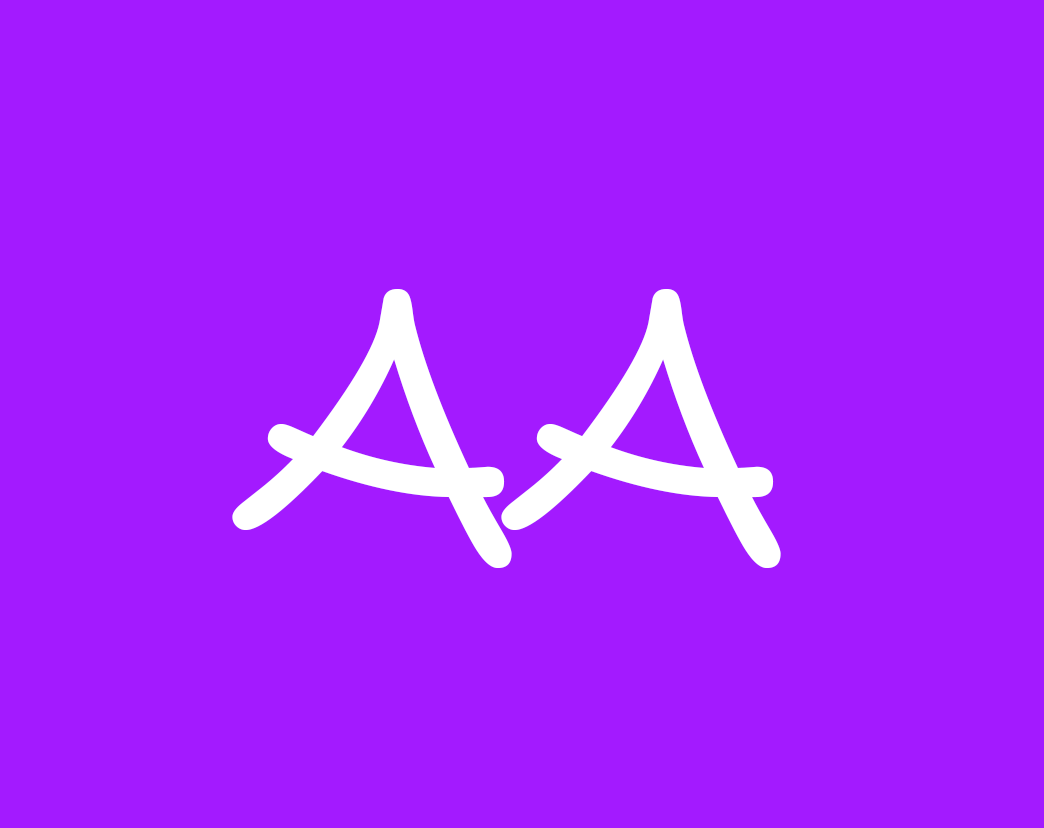
<style>
.page{position:relative;width:1044px;height:828px;background:#a31aff}
.page>*{position:absolute;margin:0}
.t1{font:300px "KristenITC-Regular";color:#ffffff}
</style>
<div class="page">
<p class="t1" style="left:232px;top:289px;width:549px;height:279px">AA</p>
</div>
